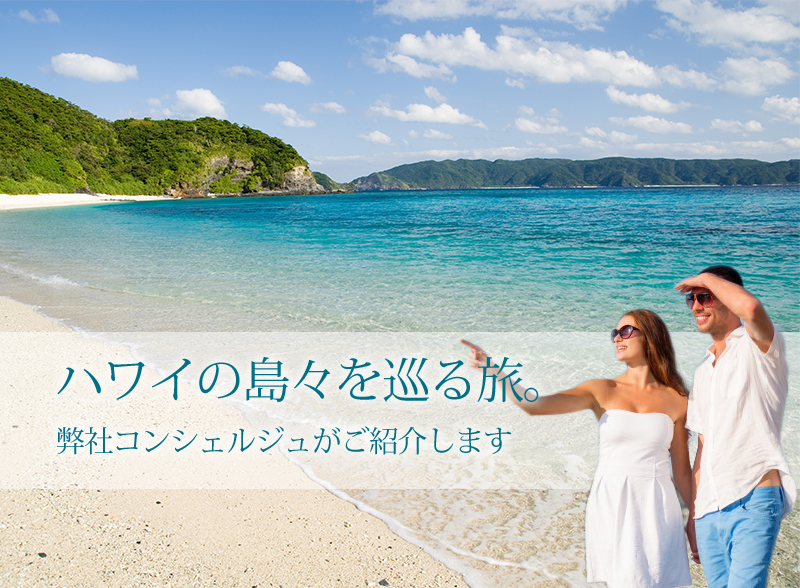
<style>
.page{position:relative;width:800px;height:588px}
.page>*{position:absolute;margin:0}
.t1{font:29.7px/54px "KozMinPr6N-Regular";letter-spacing:-0.04em;color:#017087}
.t2{font:48.6px/54px "KozMinPr6N-Regular";letter-spacing:-0.04em;color:#017087}
</style>
<div class="page">
<p class="t1" style="left:56px;top:356px;width:483px;height:99px"><span class="t2">ハワイの島々を巡る旅。<br></span>弊社コンシェルジュがご紹介します</p>
</div>
